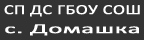
<style>
.page{position:relative;width:144px;height:40px;background:#333333}
.page>*{position:absolute;margin:0}
.t1{font:13.9px/18.7px "Calibri";color:#ffffff;font-weight:bold;scale:1.3 1}
.t2{font:13.9px/18.7px "Calibri";color:#ffffff;font-weight:bold;scale:1.91 1}
</style>
<div class="page">
<p class="t1" style="left:4px;top:5px;width:136px;height:31px;text-align:center">СП ДС ГБОУ СОШ<br><span class="t2">с. Домашка</span></p>
</div>
